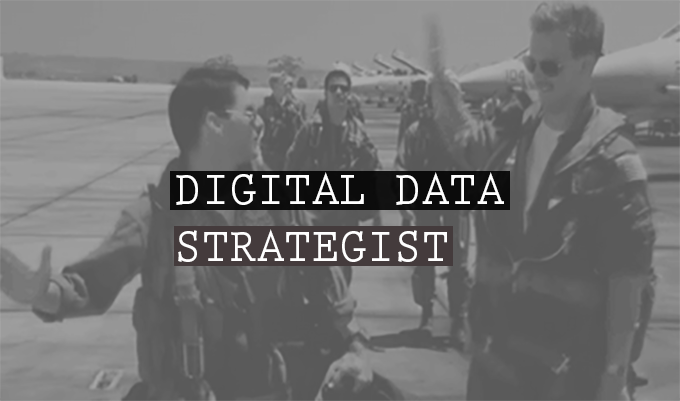
<style>
.page{position:relative;width:680px;height:401px}
.page>*{position:absolute;margin:0}
.t1{font:48px "PrestigeEliteStd-Bd";color:#ffffff;scale:0.95 1}
</style>
<div class="page">
<p class="t1" style="left:176px;top:172px;width:328px;height:90px">DIGITAL DATA<br>STRATEGIST</p>
</div>
